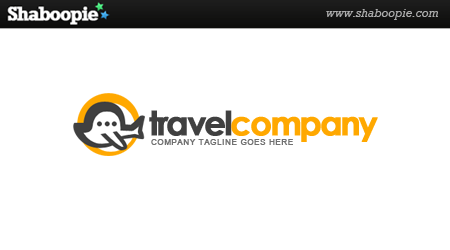
<style>
.page{position:relative;width:450px;height:250px;background:#ffffff}
.page>*{position:absolute;margin:0}
.t1{font:33.3px "CenturyGothic-Bold";letter-spacing:-0.075em;color:#ffa800;font-weight:bold}
.t2{font:33.3px "CenturyGothic-Bold";letter-spacing:-0.075em;color:#404040;font-weight:bold}
.t3{font:7.5px "ArialMT";letter-spacing:0.1em;color:#717171;font-weight:bold}
</style>
<div class="page">
<p class="t1" style="left:149px;top:110px;width:229px;height:32px"><span class="t2">travel</span>company</p>
<p class="t3" style="left:151px;top:139px;width:142px;height:6px">COMPANY TAGLINE GOES HERE</p>
</div>
